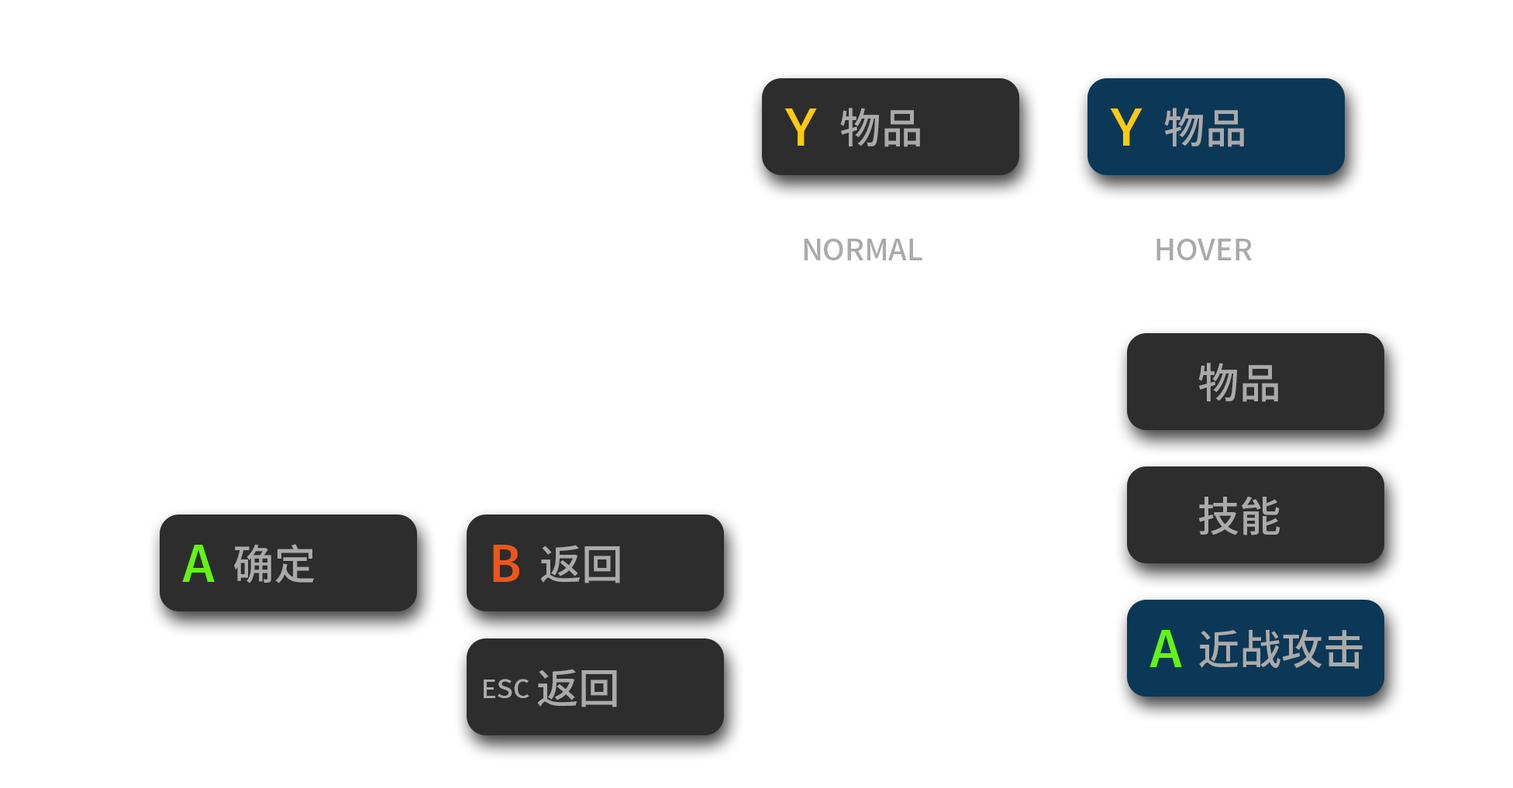
<style>
.page{position:relative;width:1513px;height:788px;background:#ffffff}
.page>*{position:absolute;margin:0}
.t1{font:54.5px "FiraMono-Medium";color:#ffcb0e;text-transform:uppercase}
.t2{font:41.7px "SourceHanSansCN-Medium";color:#aaaaaa;text-transform:uppercase}
.t3{font:29.5px "SourceHanSansCN-Medium";color:#aaaaaa;text-transform:uppercase}
.t4{font:54.5px "FiraMono-Medium";color:#62f513;text-transform:uppercase}
.t5{font:54.5px "FiraMono-Medium";color:#ed561b;text-transform:uppercase}
.t6{font:27.2px "FiraMono-Medium";color:#aaaaaa;text-transform:uppercase}
</style>
<div class="page">
<p class="t1" style="left:784px;top:109px;width:33px;height:37px">Y</p>
<p class="t2" style="left:840px;top:108px;width:80px;height:39px">物品</p>
<p class="t1" style="left:1110px;top:109px;width:32px;height:37px">Y</p>
<p class="t2" style="left:1164px;top:108px;width:80px;height:39px">物品</p>
<p class="t3" style="left:804px;top:239px;width:118px;height:21px">normal</p>
<p class="t3" style="left:1156px;top:239px;width:96px;height:21px">HOVER</p>
<p class="t2" style="left:1198px;top:363px;width:80px;height:39px">物品</p>
<p class="t2" style="left:1198px;top:496px;width:82px;height:40px">技能</p>
<p class="t4" style="left:182px;top:545px;width:33px;height:37px">A</p>
<p class="t2" style="left:234px;top:544px;width:81px;height:40px">确定</p>
<p class="t5" style="left:493px;top:545px;width:26px;height:37px">B</p>
<p class="t2" style="left:540px;top:545px;width:80px;height:39px">返回</p>
<p class="t2" style="left:1199px;top:629px;width:163px;height:40px">近战攻击</p>
<p class="t4" style="left:1149px;top:630px;width:33px;height:37px">A</p>
<p class="t2" style="left:537px;top:669px;width:80px;height:39px">返回</p>
<p class="t6" style="left:484px;top:679px;width:45px;height:19px">ESC</p>
</div>
